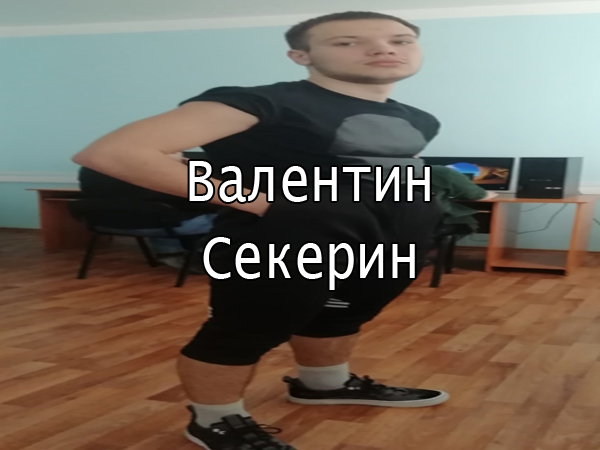
<style>
.page{position:relative;width:600px;height:450px}
.page>*{position:absolute;margin:0}
.t1{font:63.6px "LucidaConsole";color:#ffffff;scale:0.81 1}
</style>
<div class="page">
<p class="t1" style="left:189px;top:161px;width:241px;height:129px;text-align:center">Валентин<br>Секерин</p>
</div>
